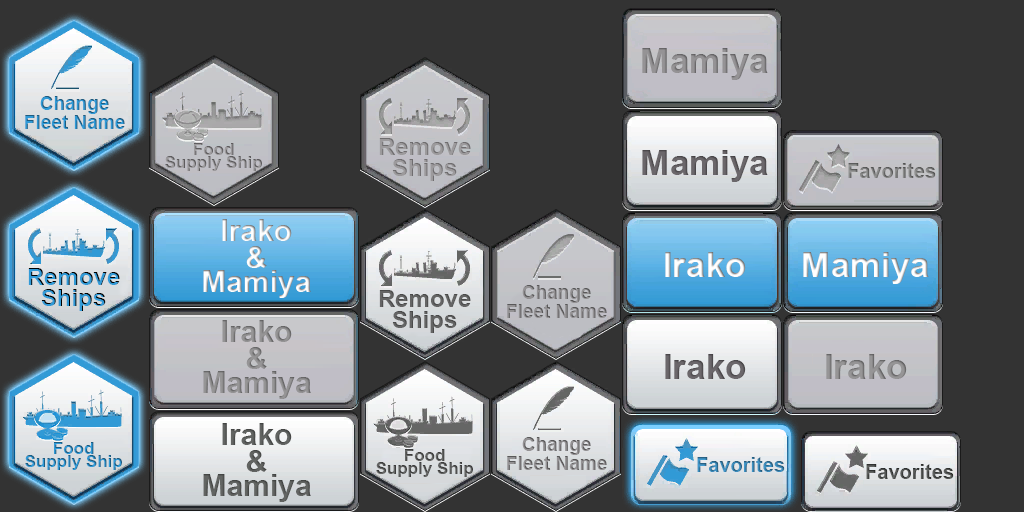
<style>
.page{position:relative;width:1024px;height:512px;background:#333333}
.page>*{position:absolute;margin:0}
.t1{font:35px "Arial-BoldMT";color:#959395}
.t2{font:19px/19px "Arial-BoldMT"}
.t3{font:17px/13px "Arial-BoldMT"}
.t4{font:24px/21px "Arial-BoldMT";color:#969799}
.t5{font:35px "Arial-BoldMT";color:#6b676b}
.t6{font:20px "Arial-BoldMT"}
.t7{font:30px/27px "Arial-BoldMT"}
.t8{font:30px/24px "Arial-BoldMT"}
.t9{font:35px "Arial-BoldMT"}
.t10{font:35px "Arial-BoldMT";color:#ffffff}
.t11{font:24px/21px "Arial-BoldMT"}
.t12{font:24px/21px "Arial-BoldMT";color:#656565}
.t13{font:30px/27px "Arial-BoldMT";color:#969596}
.t14{font:30px/24px "Arial-BoldMT";color:#969596}
.t15{font:35px "Arial-BoldMT";color:#969596}
.t16{font:30px/27px "Arial-BoldMT";color:#636563}
.t17{font:30px/24px "Arial-BoldMT";color:#636563}
.t18{font:17px/13px "Arial-BoldMT";color:#585858}
.t19{font:20px "Arial-BoldMT";color:#4e504e}
</style>
<div class="page">
<p class="t1" style="left:642px;top:48px;width:126px;height:32px">Mamiya</p>
<p class="t2" style="left:25px;top:96px;width:100px;height:33px;text-align:center">Change<br>Fleet Name</p>
<p class="t3" style="left:165px;top:143px;width:97px;height:28px;text-align:center">Food<br>Supply Ship</p>
<p class="t4" style="left:379px;top:138px;width:92px;height:43px;text-align:center">Remove<br>Ships</p>
<p class="t5" style="left:642px;top:150px;width:126px;height:32px">Mamiya</p>
<p class="t6" style="left:848px;top:163px;width:88px;height:15px">Favorites</p>
<p class="t7" style="left:203px;top:219px;width:108px;height:79px;text-align:center">Irako<br>&amp;<br><span class="t8">Mamiya</span></p>
<p class="t9" style="left:665px;top:252px;width:81px;height:25px">Irako</p>
<p class="t10" style="left:803px;top:252px;width:126px;height:32px">Mamiya</p>
<p class="t11" style="left:28px;top:268px;width:92px;height:43px;text-align:center">Remove<br>Ships</p>
<p class="t12" style="left:379px;top:290px;width:92px;height:43px;text-align:center">Remove<br>Ships</p>
<p class="t2" style="left:507px;top:285px;width:100px;height:33px;text-align:center">Change<br>Fleet Name</p>
<p class="t13" style="left:203px;top:320px;width:108px;height:79px;text-align:center">Irako<br>&amp;<br><span class="t14">Mamiya</span></p>
<p class="t5" style="left:665px;top:354px;width:81px;height:25px">Irako</p>
<p class="t15" style="left:826px;top:354px;width:81px;height:25px">Irako</p>
<p class="t16" style="left:203px;top:423px;width:108px;height:79px;text-align:center">Irako<br>&amp;<br><span class="t17">Mamiya</span></p>
<p class="t2" style="left:507px;top:437px;width:100px;height:33px;text-align:center">Change<br>Fleet Name</p>
<p class="t3" style="left:25px;top:442px;width:97px;height:28px;text-align:center">Food<br>Supply Ship</p>
<p class="t18" style="left:376px;top:449px;width:97px;height:28px;text-align:center">Food<br>Supply Ship</p>
<p class="t6" style="left:697px;top:457px;width:88px;height:15px">Favorites</p>
<p class="t19" style="left:866px;top:464px;width:88px;height:15px">Favorites</p>
</div>
